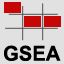
<style>
.page{position:relative;width:64px;height:64px;background:#e1e1e1}
.page>*{position:absolute;margin:0}
.t1{font:20.5px "Arial-BoldMT";color:#000000}
</style>
<div class="page">
<p class="t1" style="left:4px;top:45px;width:57px;height:16px">GSEA</p>
</div>
